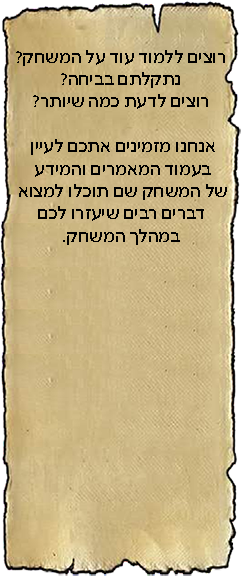
<style>
.page{position:relative;width:241px;height:576px}
.page>*{position:absolute;margin:0}
.t1{font:18.7px "NarkissTam-Medium";color:#000000}
</style>
<div class="page">
<p class="t1" style="left:16px;top:50px;width:211px;height:195px;text-align:center">רוצים ללמוד עוד על המשחק?<br>נתקלתם בביחה?<br>רוצים לדעת כמה שיותר?<br><br>אנחנו מזמינים אתכם לעיין <br>בעמוד המאמרים והמידע <br>של המשחק שם תוכלו למצוא <br>דברים רבים שיעזרו לכם<br>במהלך המשחק.</p>
</div>
